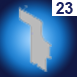
<style>
.page{position:relative;width:77px;height:77px}
.page>*{position:absolute;margin:0}
.t1{font:16px "Arial-BoldMT";color:#182163}
</style>
<div class="page">
<p class="t1" style="left:56px;top:2px;width:17px;height:12px">23</p>
</div>
